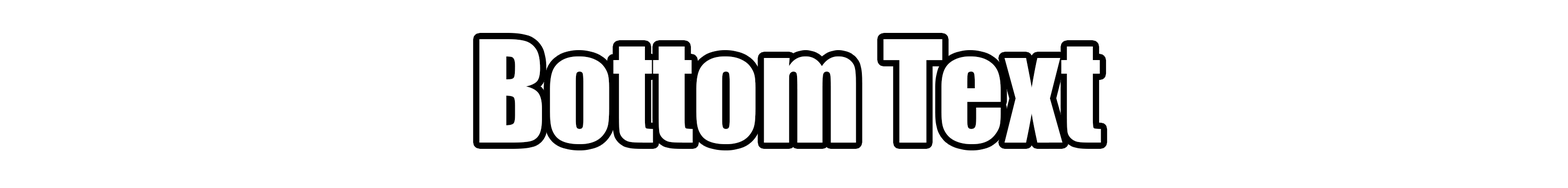
<style>
.page{position:relative;width:1568px;height:188px;background:#ffffff}
.page>*{position:absolute;margin:0}
.t1{font:130.5px "Impact";color:#ffffff}
</style>
<div class="page">
<p class="t1" style="left:479px;top:39px;width:622px;height:105px">Bottom Text</p>
</div>
